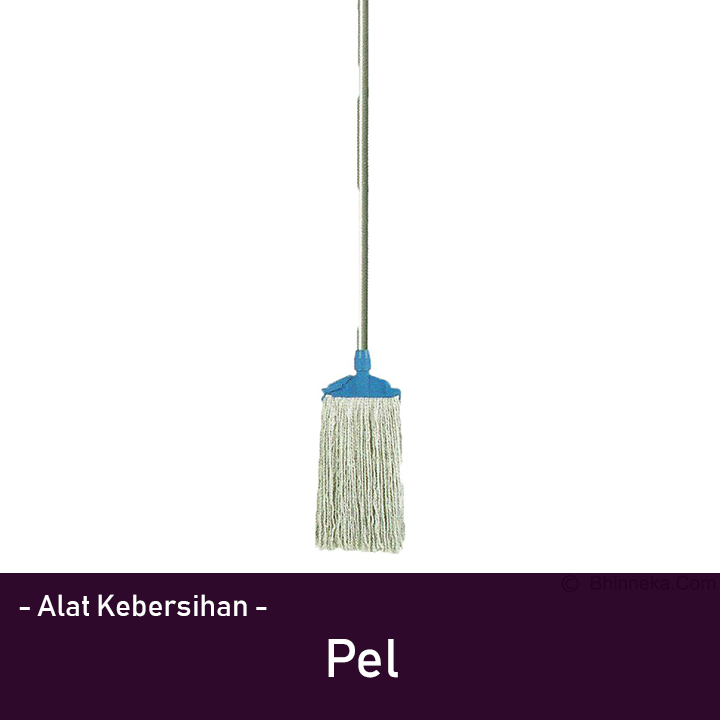
<style>
.page{position:relative;width:720px;height:720px;background:#ffffff}
.page>*{position:absolute;margin:0}
.t1{font:30px "Bahnschrift";color:#ffffff}
.t2{font:53.6px "Bahnschrift";color:#ffffff}
</style>
<div class="page">
<p class="t1" style="left:19px;top:594px;width:248px;height:23px">- Alat Kebersihan -</p>
<p class="t2" style="left:328px;top:639px;width:70px;height:39px">Pel</p>
</div>
